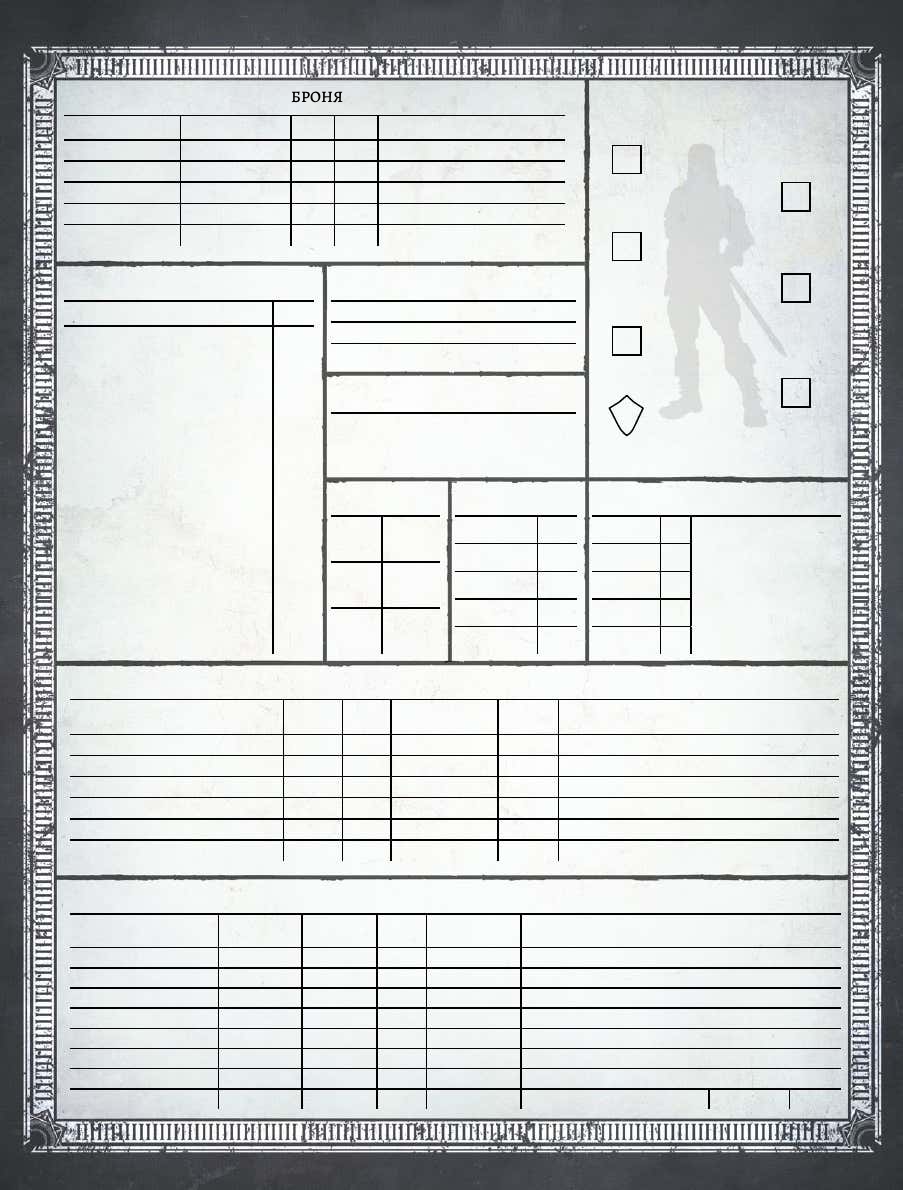
<style>
.page{position:relative;width:903px;height:1190px}
.page>*{position:absolute;margin:0}
.t1{font:16px "AlegreyaRoman-Medium";color:#000000;text-transform:uppercase}
</style>
<div class="page">
<p class="t1" style="left:291px;top:91px;width:52px;height:12px">Броня</p>
</div>
